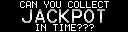
<style>
.page{position:relative;width:128px;height:32px;background:#000000}
.page>*{position:absolute;margin:0}
.t1{font:10px "Terminal";color:#ffffff}
.t2{font:16px "Terminal";letter-spacing:0.2em}
</style>
<div class="page">
<p class="t1" style="left:20px;top:1px;width:89px;height:7px">CAN YOU COLLECT</p>
<p class="t2" style="left:22px;top:9px;width:83px;height:14px">JACKPOT</p>
<p class="t1" style="left:36px;top:24px;width:58px;height:7px">IN TIME???</p>
</div>
